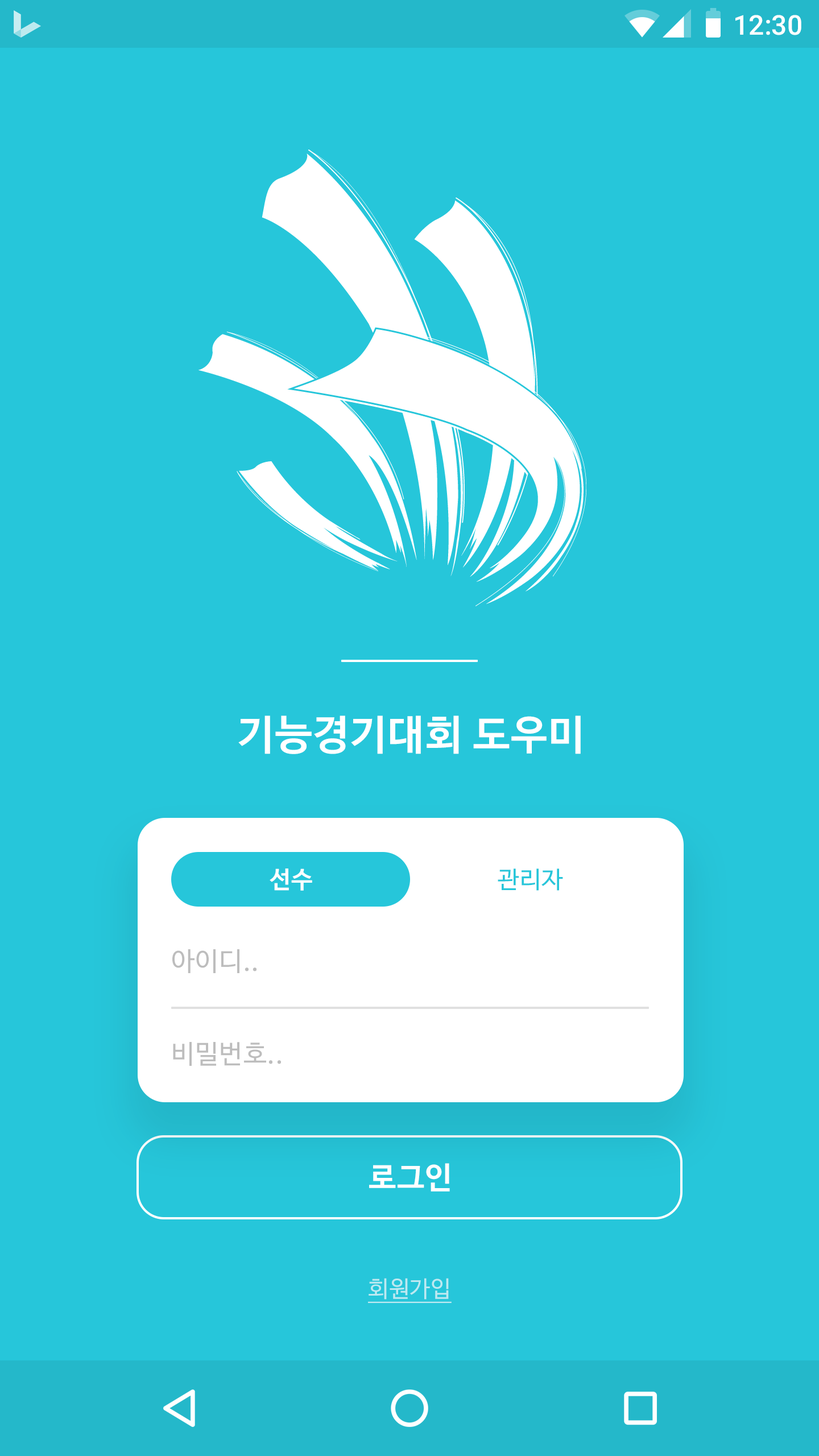
<style>
.page{position:relative;width:819px;height:1456px;background:#26c6da}
.page>*{position:absolute;margin:0}
.t1{font:27.3px "Roboto-Medium";color:#ffffff}
.t2{font:40.9px "NanumBarunGothicBold";letter-spacing:0.025em;color:#ffffff}
.t3{font:23.9px "NanumBarunGothicBold";letter-spacing:0.025em;color:#ffffff}
.t4{font:23.9px "NanumBarunGothic";letter-spacing:0.025em;color:#26c6da}
.t5{font:26.2px "NanumBarunGothic";letter-spacing:0.025em;color:#bdbdbd}
.t6{font:30.7px "NanumBarunGothicBold";letter-spacing:0.025em;color:#ffffff}
.t7{font:22.7px "NanumBarunGothic";letter-spacing:0.025em;color:#bde9f1;text-decoration:underline}
</style>
<div class="page">
<p class="t1" style="left:735px;top:15px;width:66px;height:20px">12:30</p>
<p class="t2" style="left:238px;top:715px;width:343px;height:39px">기능경기대회 도우미</p>
<p class="t3" style="left:270px;top:868px;width:42px;height:23px">선수</p>
<p class="t4" style="left:498px;top:868px;width:65px;height:23px">관리자</p>
<p class="t5" style="left:172px;top:949px;width:85px;height:24px">아이디..</p>
<p class="t5" style="left:173px;top:1042px;width:108px;height:24px">비밀번호..</p>
<p class="t6" style="left:369px;top:1163px;width:81px;height:29px">로그인</p>
<p class="t7" style="left:368px;top:1278px;width:84px;height:25px">회원가입</p>
</div>
